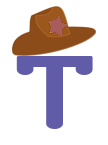
<style>
.page{position:relative;width:108px;height:145px;background:#ffffff}
.page>*{position:absolute;margin:0}
.t1{font:109.7px "OCRAExtended";color:#605ca8;font-weight:bold;scale:1.62 1}
</style>
<div class="page">
<p class="t1" style="left:16px;top:56px;width:77px;height:73px">T</p>
</div>
